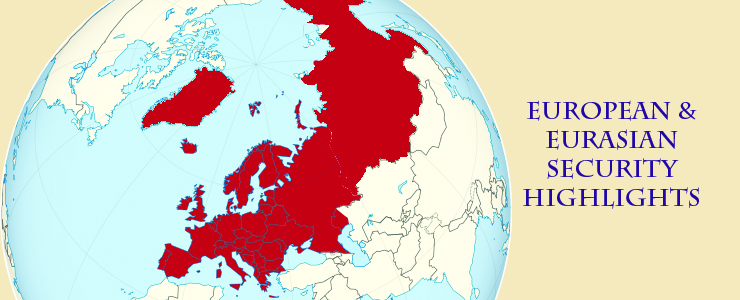
<style>
.page{position:relative;width:740px;height:300px;background:#f4eabe}
.page>*{position:absolute;margin:0}
.t1{font:24px "CharlemagneStd-Bold";color:#2108a6}
.t2{font:24px "CharlemagneStd-Bold";color:#c7072b}
</style>
<div class="page">
<p class="t1" style="left:523px;top:100px;width:176px;height:109px">European &amp;<br>Eurasian<br>Security<br>highlights<br><br><br><span class="t2">2013-2014</span></p>
</div>
